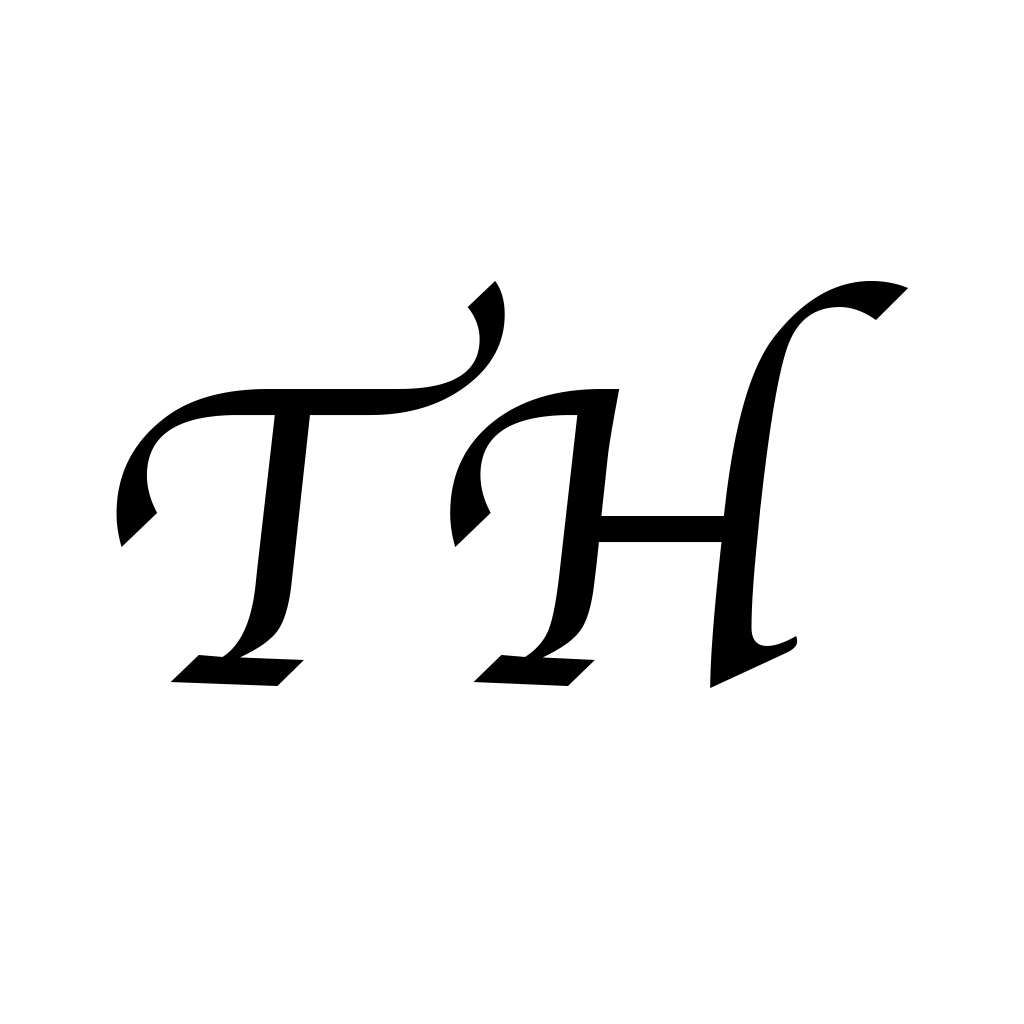
<style>
.page{position:relative;width:1024px;height:1024px;background:#ffffff}
.page>*{position:absolute;margin:0}
.t1{font:445.6px "Apple-Chancery";color:#010000}
</style>
<div class="page">
<p class="t1" style="left:116px;top:281px;width:793px;height:407px">TH</p>
</div>
